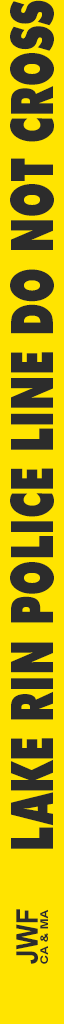
<style>
.page{position:relative;width:64px;height:1024px;background:#ffe400}
.page>*{position:absolute;margin:0}
.t1{font:58.8px "Futura-Black-Bold";color:#2c2c2c;scale:0.71 1}
.t2{font:58.8px "Futura-Black-Bold";letter-spacing:0.06em;color:#2c2c2c;scale:0.71 1}
.t3{font:30.1px "Arial-BoldMT";color:#2c2c2c;scale:0.88 1}
.t4{font:10.7px "Arial-BoldMT";color:#2c2c2c;scale:1.22 1}
</style>
<div class="page">
<p class="t1" style="left:10px;top:0px;width:44px;height:849px;rotate:-90deg"><span class="t2">L</span>AKE RIN POLICE LINE DO NOT CROSS</p>
<p class="t3" style="left:16px;top:909px;width:22px;height:55px;rotate:-90deg">JWF</p>
<p class="t4" style="left:40px;top:909px;width:8px;height:55px;rotate:-90deg">CA &amp; MA</p>
</div>
